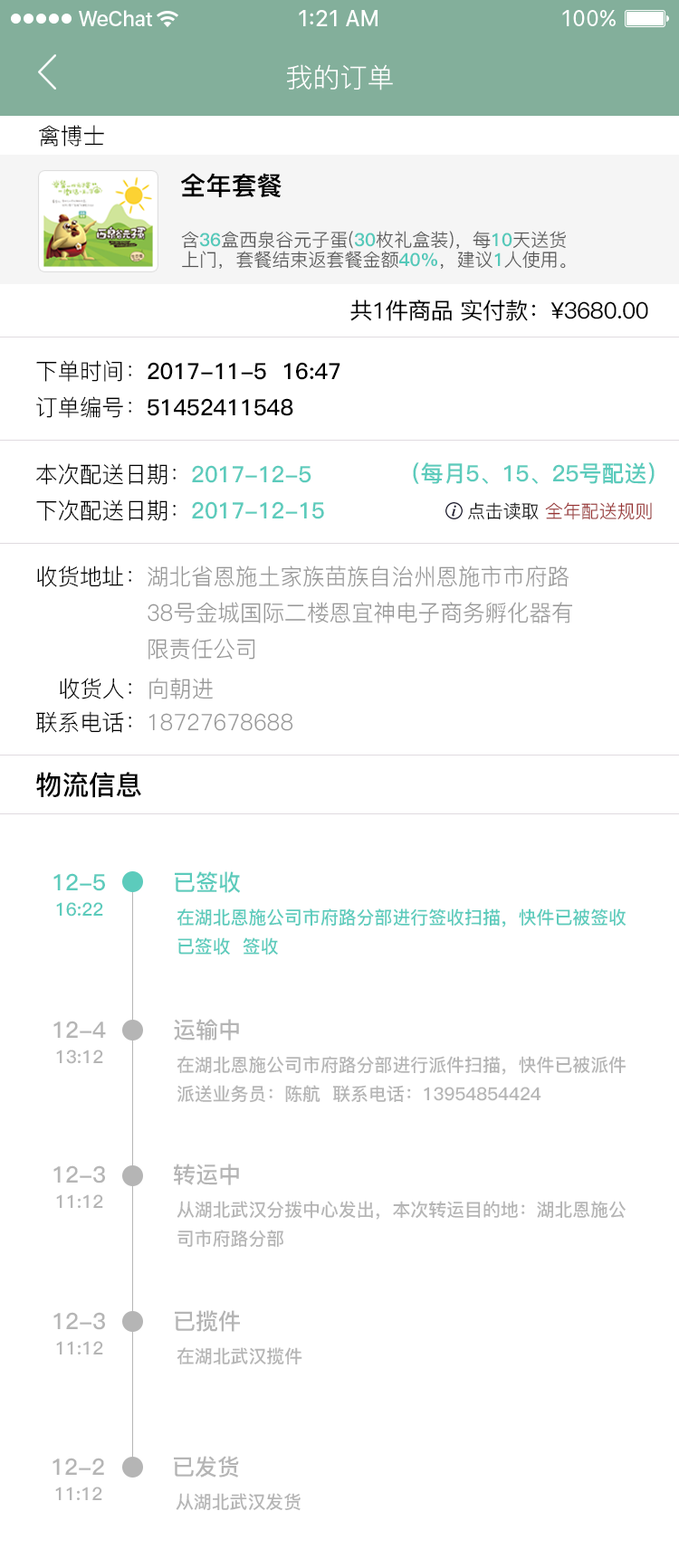
<style>
.page{position:relative;width:679px;height:1568px;background:#ffffff}
.page>*{position:absolute;margin:0}
.t1{font:27.1px "PingFang-SC-Regular";color:#ffffff;text-transform:uppercase}
.t2{font:22.7px "PingFang-SC-Regular";color:#000000}
.t3{font:25.4px "PingFang-SC-Heavy";color:#000000}
.t4{font:18.1px/19.7px "PingFang-SC-Regular"}
.t5{font:18.1px/19.7px "PingFang-SC-Heavy"}
.t6{font:22.6px "PingFang-SC-Medium";letter-spacing:-0.03em;color:#000000}
.t7{font:22.6px/36.2px "PingFang-SC-Bold";color:#000000}
.t8{font:22.6px/36.2px "PingFang-SC-Regular";color:#000000}
.t9{font:22.6px/36.2px "PingFang-SC-Bold";color:#5ccbbc}
.t10{font:22.6px "PingFang-SC-Bold";color:#5ccbbc}
.t11{font:18.1px "PingFang-SC-Regular";color:#983131}
.t12{font:18.1px "PingFang-SC-Regular";color:#000000}
.t13{font:22.6px/36.2px "PingFang-SC-Regular";color:#969696}
.t14{font:22.6px "PingFang-SC-Regular";color:#000000}
.t15{font:22.6px "PingFang-SC-Regular";color:#969696}
.t16{font:27.1px "PingFang-SC-Bold";color:#000000}
.t17{font:18.1px "PingFang-SC-Bold";color:#5ccbbc}
.t18{font:18.1px/29.3px "PingFang-SC-Bold";color:#5ccbbc}
.t19{font:22.6px "PingFang-SC-Bold";color:#b5b5b5}
.t20{font:18.1px "PingFang-SC-Bold";color:#b5b5b5}
.t21{font:18.1px/29.3px "PingFang-SC-Bold";color:#b5b5b5}
</style>
<div class="page">
<p class="t1" style="left:287px;top:64px;width:106px;height:26px">我的订单</p>
<p class="t2" style="left:39px;top:125px;width:65px;height:22px">禽博士</p>
<p class="t3" style="left:181px;top:173px;width:100px;height:24px">全年套餐</p>
<p class="t4" style="left:181px;top:231px;width:384px;height:39px">含<span class="t5">36</span>盒西泉谷元子蛋(<span class="t5">30</span>枚礼盒装)，每<span class="t5">10</span>天送货<br>上门，套餐结束返套餐金额<span class="t5">40%</span>，建议<span class="t5">1</span>人使用。</p>
<p class="t6" style="left:350px;top:299px;width:298px;height:22px">共1件商品 实付款：¥3680.00</p>
<p class="t7" style="left:36px;top:360px;width:304px;height:58px"><span class="t8">下单时间：</span>2017-11-5  16:47<br><span class="t8">订单编号：</span>51452411548</p>
<p class="t9" style="left:36px;top:463px;width:288px;height:58px"><span class="t8">本次配送日期：</span>2017-12-5 <br><span class="t8">下次配送日期：</span>2017-12-15</p>
<p class="t10" style="left:413px;top:462px;width:241px;height:22px">（每月5、15、25号配送）</p>
<p class="t11" style="left:468px;top:502px;width:183px;height:18px"><span class="t12">点击读取 </span>全年配送规则</p>
<p class="t13" style="left:37px;top:565px;width:536px;height:95px"><span class="t8">收货地址：</span>湖北省恩施土家族苗族自治州恩施市市府路<br>               38号金城国际二楼恩宜神电子商务孵化器有<br>               限责任公司</p>
<p class="t14" style="left:60px;top:678px;width:153px;height:21px">收货人：<span class="t15">向朝进</span></p>
<p class="t15" style="left:36px;top:711px;width:257px;height:22px"><span class="t14">联系电话：</span>18727678688</p>
<p class="t16" style="left:36px;top:772px;width:105px;height:26px">物流信息</p>
<p class="t10" style="left:53px;top:873px;width:52px;height:18px">12-5</p>
<p class="t10" style="left:175px;top:871px;width:65px;height:22px">已签收</p>
<p class="t17" style="left:56px;top:902px;width:47px;height:15px">16:22</p>
<p class="t18" style="left:176px;top:908px;width:450px;height:47px">在湖北恩施公司市府路分部进行签收扫描，快件已被签收<br>已签收  签收</p>
<p class="t19" style="left:53px;top:1021px;width:53px;height:17px">12-4</p>
<p class="t19" style="left:174px;top:1019px;width:65px;height:22px">运输中</p>
<p class="t20" style="left:56px;top:1050px;width:47px;height:14px">13:12</p>
<p class="t21" style="left:176px;top:1056px;width:449px;height:47px">在湖北恩施公司市府路分部进行派件扫描，快件已被派件<br>派送业务员：陈航  联系电话：13954854424</p>
<p class="t19" style="left:53px;top:1165px;width:52px;height:18px">12-3</p>
<p class="t19" style="left:174px;top:1164px;width:65px;height:21px">转运中</p>
<p class="t20" style="left:56px;top:1194px;width:47px;height:14px">11:12</p>
<p class="t21" style="left:176px;top:1201px;width:449px;height:46px">从湖北武汉分拨中心发出，本次转运目的地：湖北恩施公<br>司市府路分部</p>
<p class="t19" style="left:53px;top:1312px;width:52px;height:18px">12-3</p>
<p class="t19" style="left:175px;top:1310px;width:65px;height:22px">已揽件</p>
<p class="t20" style="left:56px;top:1341px;width:47px;height:13px">11:12</p>
<p class="t20" style="left:176px;top:1347px;width:126px;height:18px">在湖北武汉揽件</p>
<p class="t19" style="left:52px;top:1458px;width:52px;height:17px">12-2</p>
<p class="t19" style="left:174px;top:1456px;width:65px;height:22px">已发货</p>
<p class="t20" style="left:55px;top:1487px;width:47px;height:13px">11:12</p>
<p class="t20" style="left:176px;top:1493px;width:124px;height:18px">从湖北武汉发货</p>
</div>
